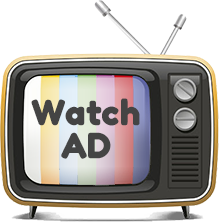
<style>
.page{position:relative;width:219px;height:222px;background:#ffffff}
.page>*{position:absolute;margin:0}
.t1{font:36.5px/24.9px "Fredoka-Bold";color:#444444}
</style>
<div class="page">
<p class="t1" style="left:31px;top:98px;width:109px;height:61px;text-align:center">Watch<br>AD</p>
</div>
